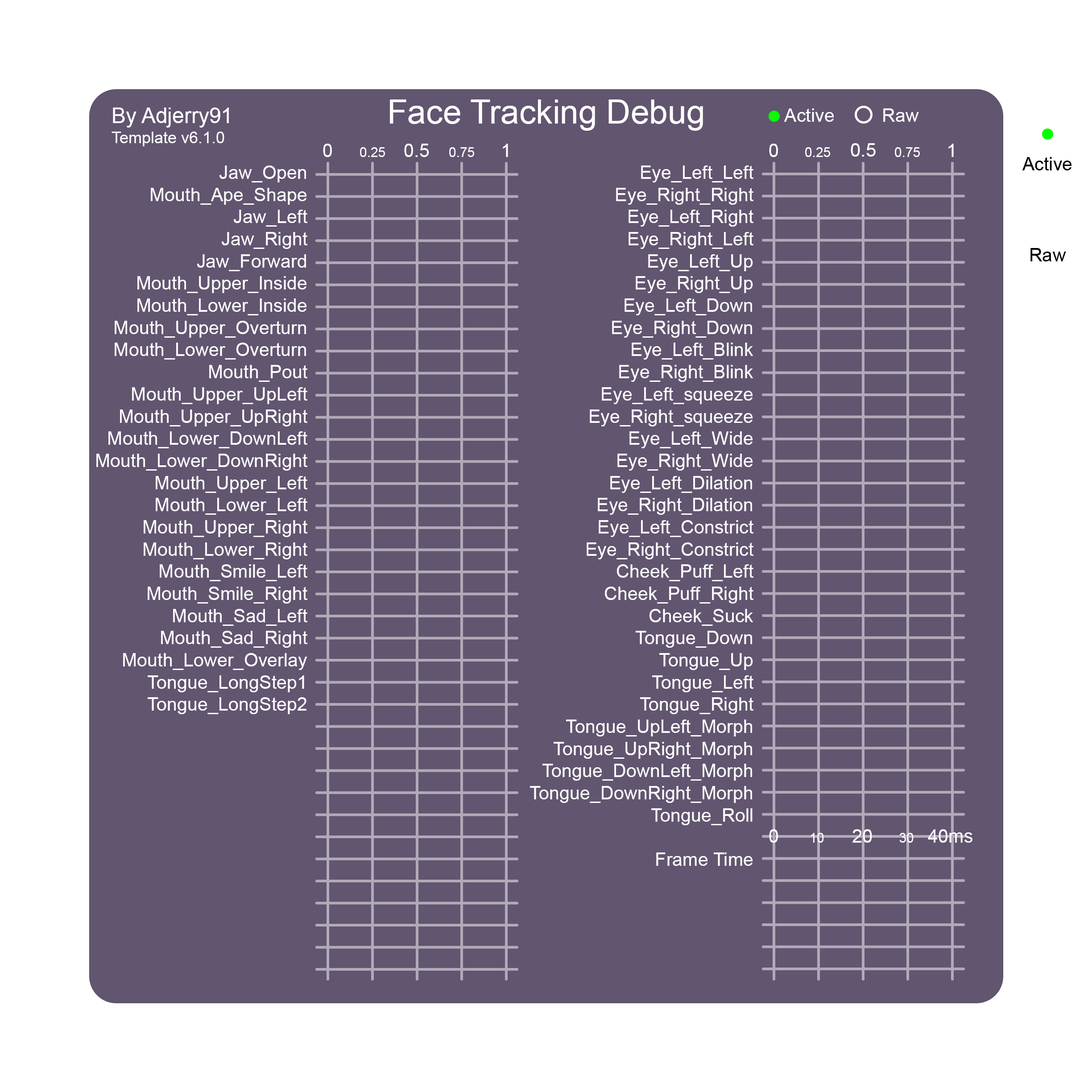
<style>
.page{position:relative;width:1092px;height:1092px;background:#625570}
.page>*{position:absolute;margin:0}
.t1{font:33.5px "ArialMT";color:#ffffff}
.t2{font:21.4px "ArialMT";color:#ffffff}
.t3{font:18.5px "ArialMT";color:#ffffff}
.t4{font:16.1px "ArialMT";color:#ffffff}
.t5{font:13.4px "ArialMT";color:#ffffff}
.t6{font:18.6px "ArialMT";color:#ffffff}
.t7{font:18.5px "ArialMT";color:#000000}
.t8{font:18.7px "ArialMT";color:#ffffff}
</style>
<div class="page">
<p class="t1" style="left:390px;top:99px;width:313px;height:32px">Face Tracking Debug</p>
<p class="t2" style="left:113px;top:108px;width:116px;height:20px">By Adjerry91</p>
<p class="t3" style="left:784px;top:108px;width:50px;height:14px">Active</p>
<p class="t3" style="left:883px;top:108px;width:36px;height:14px">Raw</p>
<p class="t4" style="left:112px;top:132px;width:112px;height:14px">Template v6.1.0</p>
<p class="t3" style="left:323px;top:144px;width:9px;height:13px">0</p>
<p class="t5" style="left:360px;top:147px;width:25px;height:10px">0.25</p>
<p class="t3" style="left:404px;top:144px;width:25px;height:13px">0.5</p>
<p class="t5" style="left:449px;top:147px;width:25px;height:10px">0.75</p>
<p class="t3" style="left:503px;top:144px;width:5px;height:13px">1</p>
<p class="t3" style="left:769px;top:144px;width:9px;height:13px">0</p>
<p class="t5" style="left:805px;top:147px;width:25px;height:10px">0.25</p>
<p class="t6" style="left:851px;top:143px;width:25px;height:14px">0.5</p>
<p class="t5" style="left:895px;top:147px;width:25px;height:10px">0.75</p>
<p class="t3" style="left:948px;top:144px;width:6px;height:13px">1</p>
<p class="t7" style="left:1022px;top:157px;width:49px;height:13px">Active</p>
<p class="t3" style="left:96px;top:165px;width:211px;height:549px;text-align:right">Jaw_Open<br>Mouth_Ape_Shape<br>Jaw_Left<br>Jaw_Right<br>Jaw_Forward<br>Mouth_Upper_Inside<br>Mouth_Lower_Inside<br>Mouth_Upper_Overturn<br>Mouth_Lower_Overturn<br>Mouth_Pout<br>Mouth_Upper_UpLeft<br>Mouth_Upper_UpRight<br>Mouth_Lower_DownLeft<br>Mouth_Lower_DownRight<br>Mouth_Upper_Left<br>Mouth_Lower_Left<br>Mouth_Upper_Right<br>Mouth_Lower_Right<br>Mouth_Smile_Left<br>Mouth_Smile_Right<br>Mouth_Sad_Left<br>Mouth_Sad_Right<br>Mouth_Lower_Overlay<br>Tongue_LongStep1<br>Tongue_LongStep2</p>
<p class="t3" style="left:530px;top:165px;width:223px;height:701px;text-align:right">Eye_Left_Left<br>Eye_Right_Right<br>Eye_Left_Right<br>Eye_Right_Left<br>Eye_Left_Up<br>Eye_Right_Up<br>Eye_Left_Down<br>Eye_Right_Down<br>Eye_Left_Blink<br>Eye_Right_Blink<br>Eye_Left_squeeze<br>Eye_Right_squeeze<br>Eye_Left_Wide<br>Eye_Right_Wide<br>Eye_Left_Dilation<br>Eye_Right_Dilation<br>Eye_Left_Constrict<br>Eye_Right_Constrict<br>Cheek_Puff_Left<br>Cheek_Puff_Right<br>Cheek_Suck<br>Tongue_Down<br>Tongue_Up<br>Tongue_Left<br>Tongue_Right<br>Tongue_UpLeft_Morph<br>Tongue_UpRight_Morph<br>Tongue_DownLeft_Morph<br>Tongue_DownRight_Morph<br>Tongue_Roll<br><br>Frame Time</p>
<p class="t7" style="left:1030px;top:248px;width:36px;height:13px">Raw</p>
<p class="t3" style="left:769px;top:829px;width:9px;height:14px">0</p>
<p class="t5" style="left:811px;top:833px;width:13px;height:10px">10</p>
<p class="t8" style="left:852px;top:829px;width:20px;height:14px">20</p>
<p class="t5" style="left:899px;top:833px;width:15px;height:10px">30</p>
<p class="t3" style="left:928px;top:829px;width:44px;height:14px">40ms</p>
</div>
